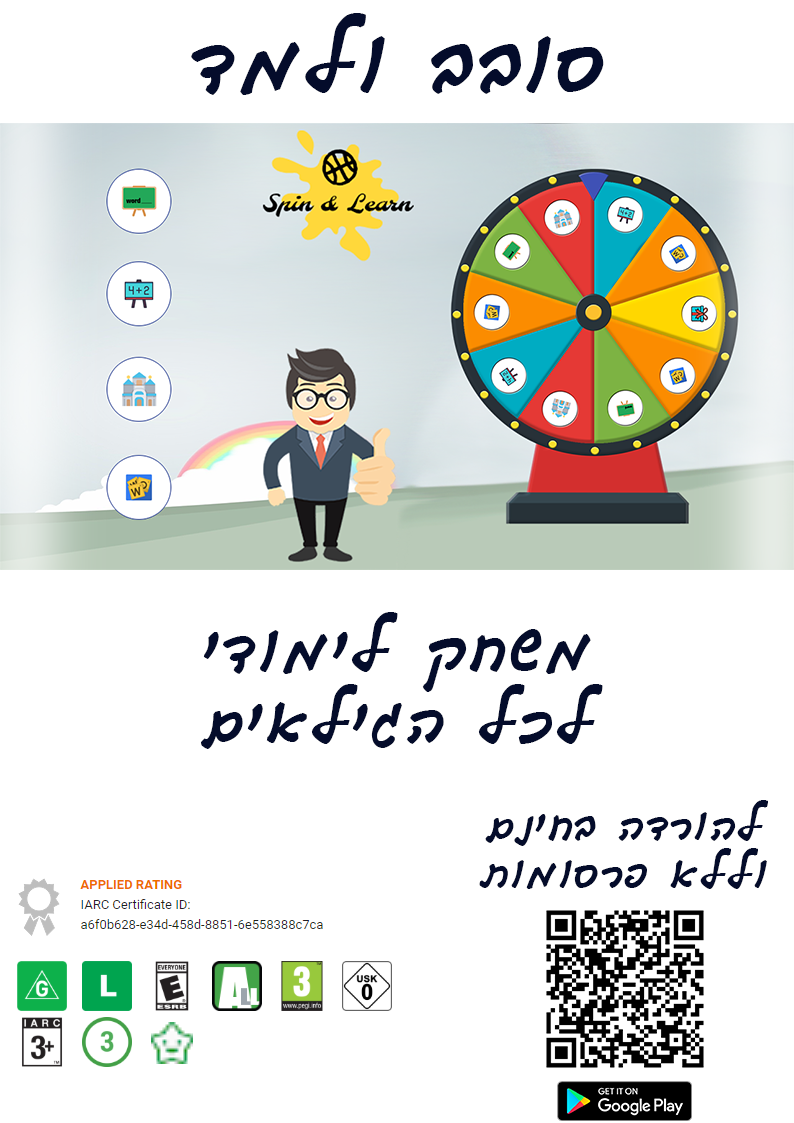
<style>
.page{position:relative;width:794px;height:1123px;background:#ffffff}
.page>*{position:absolute;margin:0}
.t1{font:80px "GuttmanYad-Brush";color:#040c2b}
.t2{font:60px "GuttmanYad-Brush";color:#040c2b}
.t3{font:40px "GuttmanYad-Brush";color:#040c2b}
</style>
<div class="page">
<p class="t1" style="left:191px;top:13px;width:413px;height:82px">סובב ולמד</p>
<p class="t2" style="left:201px;top:612px;width:402px;height:137px;text-align:center">משחק לימודי<br>לכל הגילאים</p>
<p class="t3" style="left:479px;top:800px;width:289px;height:89px;text-align:center">להורדה בחינם<br>וללא פרסומות</p>
</div>
